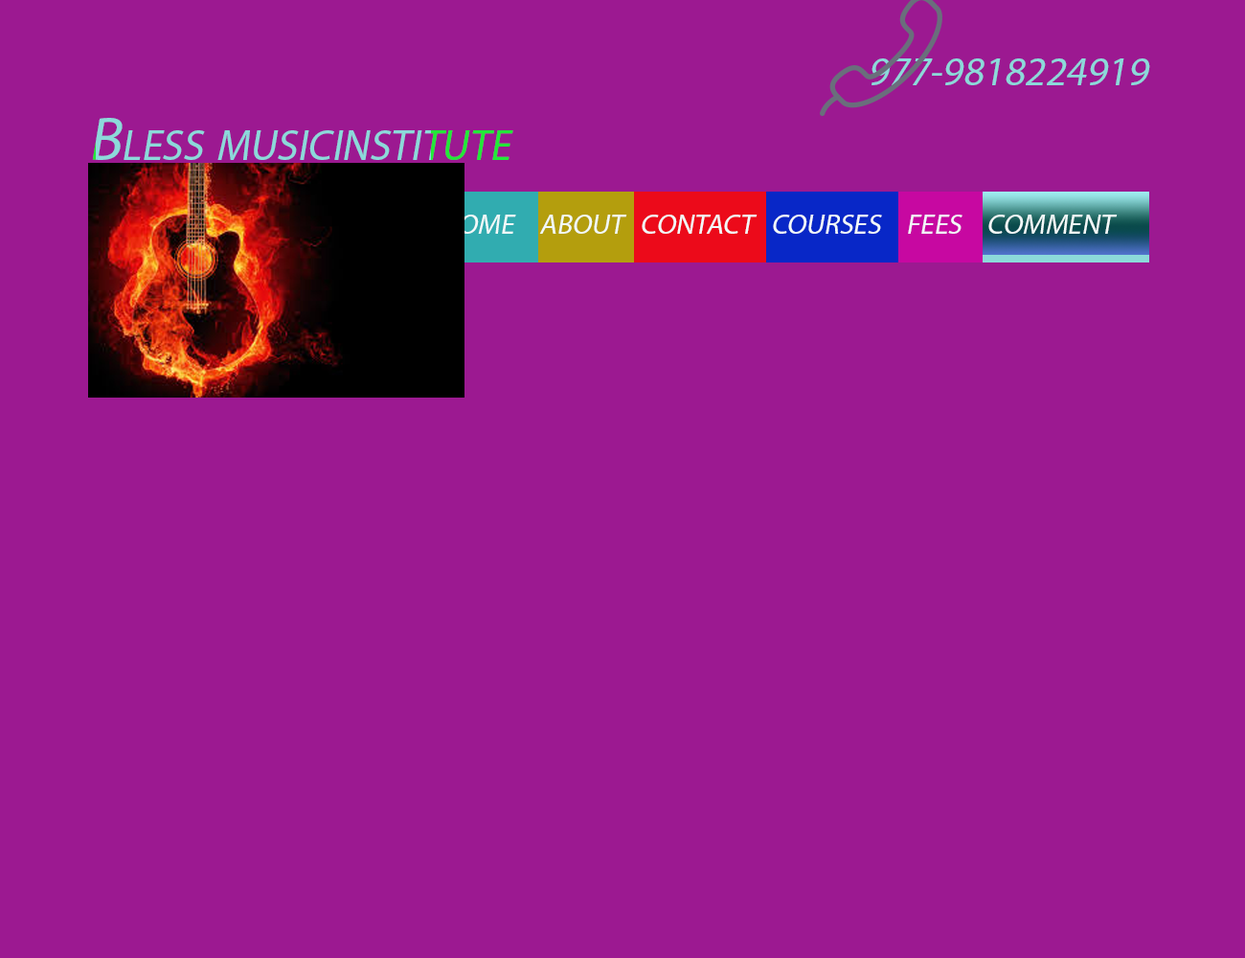
<style>
.page{position:relative;width:1245px;height:958px;background:#9c1991}
.page>*{position:absolute;margin:0}
.t1{font:69.5px "MyriadPro-Regular";color:#8cd9da;font-variant:small-caps;font-style:italic}
.t2{font:106.7px "MyriadPro-Regular";color:#8cd9da;font-variant:small-caps;font-style:italic;scale:0.96 1}
.t3{font:68.9px "MyriadPro-Regular";color:#f2f9f9;font-variant:small-caps;font-style:italic}
</style>
<div class="page">
<p class="t1" style="left:872px;top:58px;width:278px;height:27px">977-9818224919</p>
<p class="t2" style="left:92px;top:118px;width:421px;height:42px">Bless musicinstitute</p>
<p class="t3" style="left:442px;top:215px;width:676px;height:19px">home   about  contact  courses   fees   comment</p>
</div>
